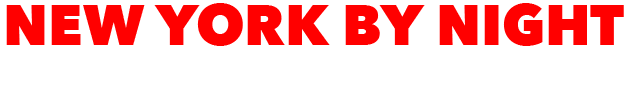
<style>
.page{position:relative;width:630px;height:95px;background:#ffffff}
.page>*{position:absolute;margin:0}
.t1{font:56.5px "AvenirNext-Heavy";color:#ff0000}
</style>
<div class="page">
<p class="t1" style="left:6px;top:3px;width:618px;height:43px">NEW YORK BY NIGHT</p>
</div>
